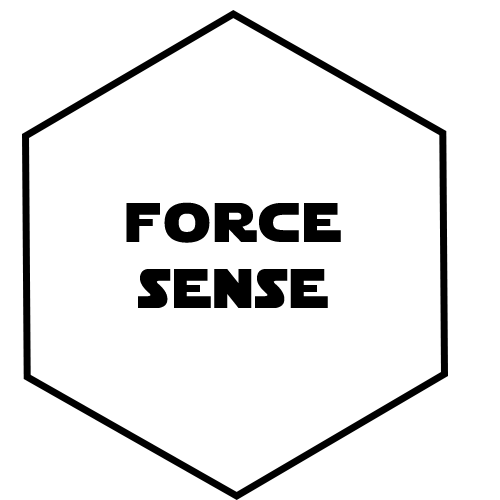
<style>
.page{position:relative;width:500px;height:500px;background:#ffffff}
.page>*{position:absolute;margin:0}
.t1{font:55px "StarJedi";letter-spacing:0.07em;color:#000000}
</style>
<div class="page">
<p class="t1" style="left:126px;top:202px;width:215px;height:106px;text-align:center">force<br>sense</p>
</div>
